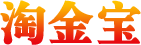
<style>
.page{position:relative;width:141px;height:45px;background:#ffffff}
.page>*{position:absolute;margin:0}
.t1{font:48px "HYa0gj"}
</style>
<div class="page">
<p class="t1" style="left:0px;top:0px;width:141px;height:45px">淘金宝</p>
</div>
